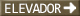
<style>
.page{position:relative;width:80px;height:16px}
.page>*{position:absolute;margin:0}
.t1{font:14.6px "Consolas";letter-spacing:-0.04em;color:#ffffff;scale:0.96 1}
</style>
<div class="page">
<p class="t1" style="left:5px;top:3px;width:56px;height:11px">ELEVADOR</p>
</div>
